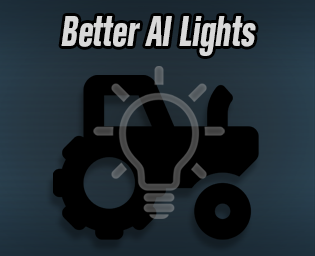
<style>
.page{position:relative;width:315px;height:256px;background:#000000}
.page>*{position:absolute;margin:0}
.t1{font:42px "AkzidenzGroteskBQ-XBdCnd";letter-spacing:-0.005em;color:#d9d9d9;font-style:italic;scale:0.75 1}
</style>
<div class="page">
<p class="t1" style="left:61px;top:16px;width:195px;height:40px">Better AI Lights</p>
</div>
